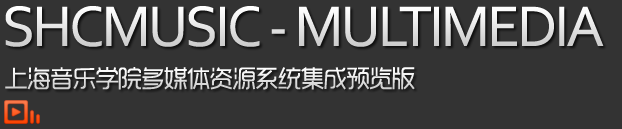
<style>
.page{position:relative;width:622px;height:129px;background:#333333}
.page>*{position:absolute;margin:0}
.t1{font:60px "Corbel";letter-spacing:-0.05em}
.t2{font:24px "RTWSYueGoTrial-Regular";letter-spacing:-0.05em;color:#eaeaea}
.t3{font:30px "RTWSYueGoTrial-Regular";letter-spacing:-0.05em;color:#eaeaea}
</style>
<div class="page">
<p class="t1" style="left:5px;top:6px;width:599px;height:41px">SHCMUSIC - MULTIMEDIA</p>
<p class="t2" style="left:5px;top:67px;width:410px;height:23px">上海音乐学院多媒体资源系统集成预览版<span class="t3">版</span></p>
</div>
